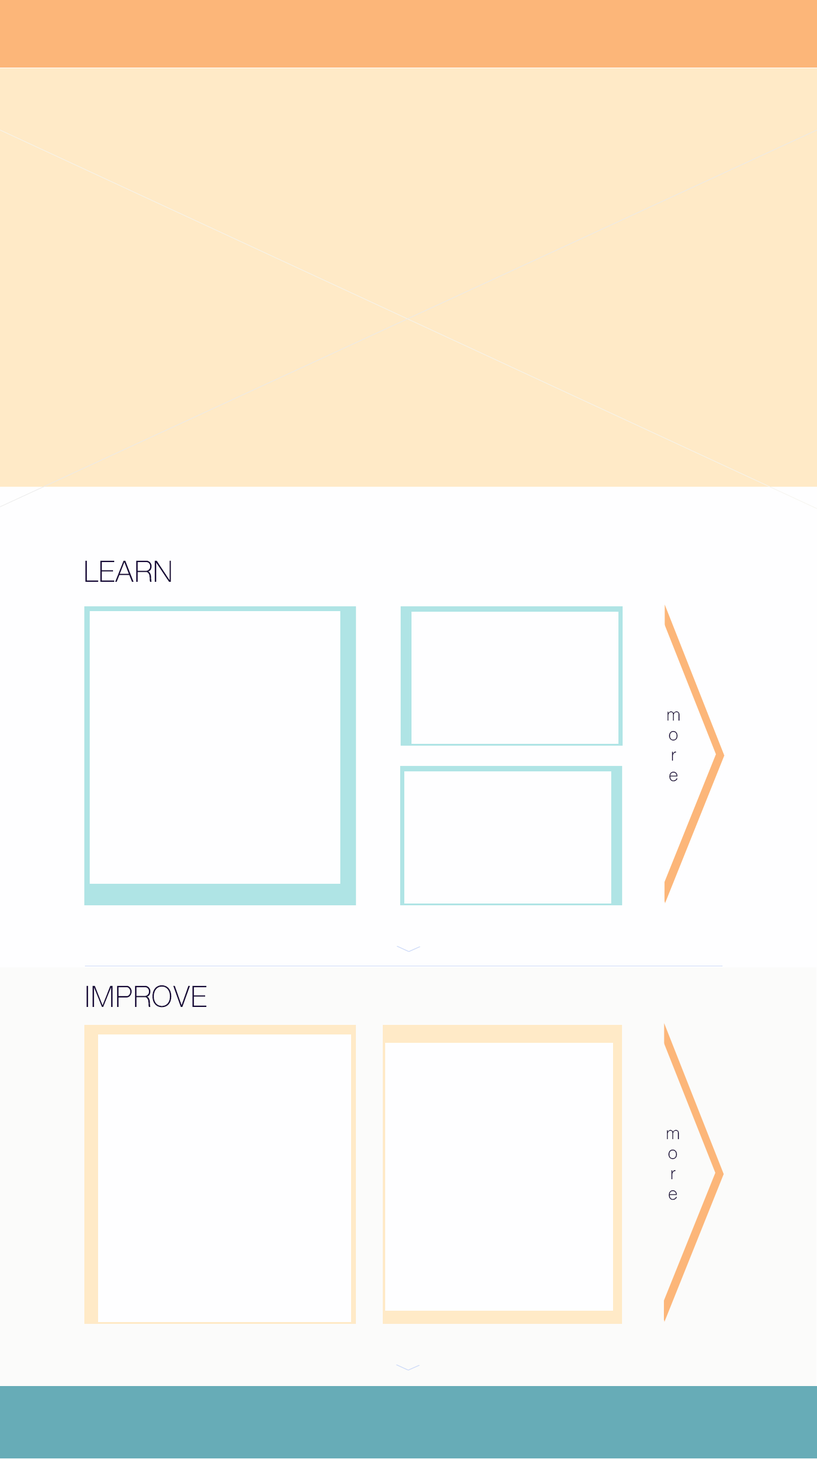
<style>
.page{position:relative;width:817px;height:1459px;background:#fefeff}
.page>*{position:absolute;margin:0}
.t1{font:28.7px "ShreeDev0714";color:#160836}
.t2{font:16.7px "ShreeDev0714";color:#160836}
</style>
<div class="page">
<p class="t1" style="left:85px;top:560px;width:86px;height:22px">LEARN</p>
<p class="t2" style="left:668px;top:711px;width:12px;height:71px;text-align:center">m<br>o<br>r<br>e</p>
<p class="t1" style="left:86px;top:985px;width:120px;height:23px">IMPROVE</p>
<p class="t2" style="left:667px;top:1130px;width:12px;height:70px;text-align:center">m<br>o<br>r<br>e</p>
</div>
